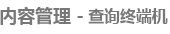
<style>
.page{position:relative;width:170px;height:34px;background:#ffffff}
.page>*{position:absolute;margin:0}
.t1{font:18px "MicrosoftYaHei-Bold";letter-spacing:-0.005em;color:#777777}
.t2{font:16px "MicrosoftYaHei-Bold";letter-spacing:-0.005em;color:#777777}
</style>
<div class="page">
<p class="t1" style="left:0px;top:7px;width:83px;height:18px">内容管理 -</p>
<p class="t2" style="left:88px;top:8px;width:80px;height:16px">查询终端机</p>
</div>
